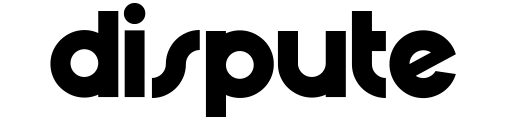
<style>
.page{position:relative;width:507px;height:120px;background:#ffffff}
.page>*{position:absolute;margin:0}
.t1{font:148.2px "RhinoSans";color:#000000}
</style>
<div class="page">
<p class="t1" style="left:50px;top:3px;width:406px;height:114px">dispute</p>
</div>
